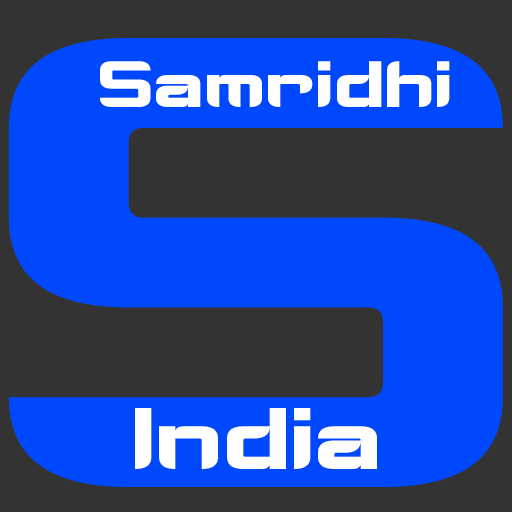
<style>
.page{position:relative;width:512px;height:512px;background:#0048fe}
.page>*{position:absolute;margin:0}
.t1{font:612.5px "Cyberverse";color:#0048fe}
.t2{font:62.5px "Cyberverse";color:#ffffff}
.t3{font:83.3px "Cyberverse";color:#ffffff}
</style>
<div class="page">
<p class="t1" style="left:8px;top:38px;width:495px;height:449px">S</p>
<p class="t2" style="left:100px;top:61px;width:350px;height:46px">Samridhi</p>
<p class="t3" style="left:135px;top:408px;width:242px;height:61px">India</p>
</div>
